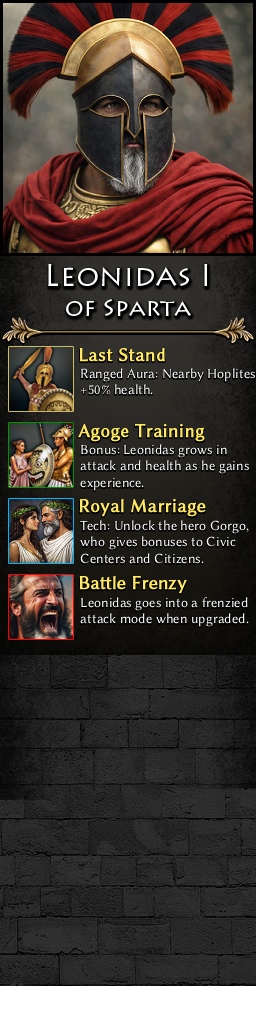
<style>
.page{position:relative;width:256px;height:1024px}
.page>*{position:absolute;margin:0}
.t1{font:30px/30px "LithosPro-Regular";color:#ffffff}
.t2{font:24px/30px "LithosPro-Regular";color:#ffffff}
.t3{font:19px "LinBiolinumO";color:#ffe963;font-weight:bold}
.t4{font:14px "LinBiolinumO";color:#ffffff}
</style>
<div class="page">
<p class="t1" style="left:48px;top:264px;width:160px;height:52px;text-align:center">Leonidas I<br><span class="t2">of Sparta</span></p>
<p class="t3" style="left:79px;top:348px;width:86px;height:14px">Last Stand</p>
<p class="t4" style="left:80px;top:368px;width:175px;height:27px">Ranged Aura: Nearby Hoplites<br>+50% health.</p>
<p class="t3" style="left:78px;top:423px;width:127px;height:19px">Agoge Training</p>
<p class="t4" style="left:80px;top:444px;width:169px;height:47px">Bonus: Leonidas grows in <br>attack and health as he gains<br>experience.</p>
<p class="t3" style="left:79px;top:499px;width:127px;height:18px">Royal Marriage</p>
<p class="t4" style="left:80px;top:520px;width:169px;height:44px">Tech: Unlock the hero Gorgo,<br>who gives bonuses to Civic<br>Centers and Citizens.</p>
<p class="t3" style="left:79px;top:575px;width:108px;height:19px">Battle Frenzy</p>
<p class="t4" style="left:80px;top:597px;width:169px;height:30px">Leonidas goes into a frenzied<br>attack mode when upgraded.</p>
</div>
